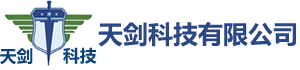
<style>
.page{position:relative;width:300px;height:70px;background:#ffffff}
.page>*{position:absolute;margin:0}
.t1{font:25px "MicrosoftYaHei-Bold";color:#2c4884}
.t2{font:16.7px "MicrosoftYaHei-Bold";color:#0b447b}
</style>
<div class="page">
<p class="t1" style="left:98px;top:22px;width:198px;height:25px">天剑科技有限公司</p>
<p class="t2" style="left:0px;top:48px;width:33px;height:17px">天剑</p>
<p class="t2" style="left:63px;top:47px;width:34px;height:17px">科技</p>
</div>
